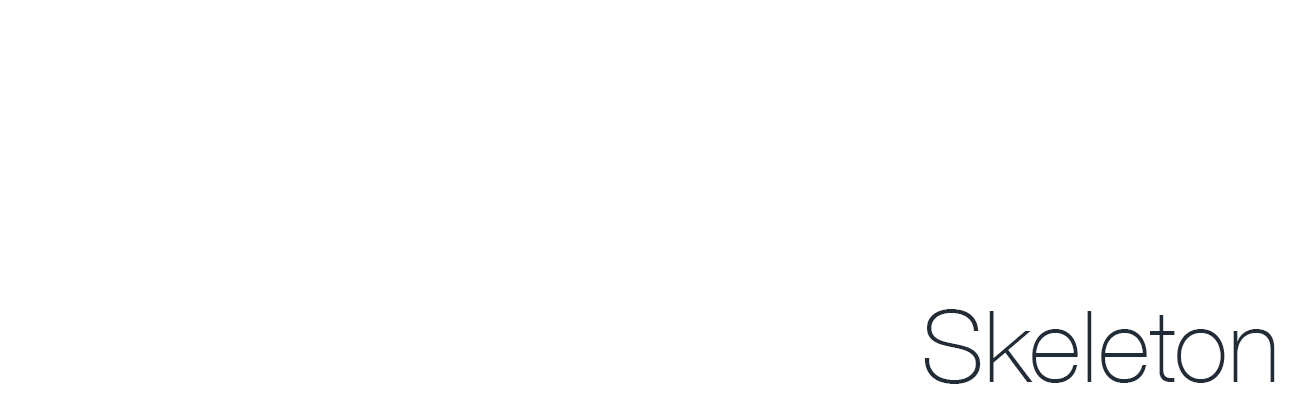
<style>
.page{position:relative;width:1300px;height:420px;background:#ffffff}
.page>*{position:absolute;margin:0}
.t1{font:100px "HelveticaNeue-Thin";color:#222c37}
</style>
<div class="page">
<p class="t1" style="left:924px;top:309px;width:351px;height:75px">Skeleton</p>
</div>
